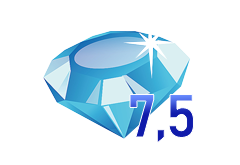
<style>
.page{position:relative;width:240px;height:165px;background:#ffffff}
.page>*{position:absolute;margin:0}
.t1{font:60px "Bahnschrift-SemiBold";letter-spacing:-0.05em}
</style>
<div class="page">
<p class="t1" style="left:130px;top:94px;width:64px;height:49px">7,5</p>
</div>
